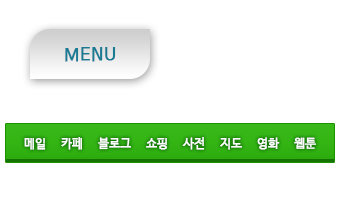
<style>
.page{position:relative;width:344px;height:206px;background:#ffffff}
.page>*{position:absolute;margin:0}
.t1{font:18px "NanumBarunGothic";color:#187a93;font-weight:bold;scale:0.96 1}
.t2{font:12px "NanumBarunGothic";color:#ffffff;font-weight:bold}
</style>
<div class="page">
<p class="t1" style="left:65px;top:47px;width:51px;height:15px">MENU</p>
<p class="t2" style="left:24px;top:137px;width:292px;height:13px">메일     카페     블로그     쇼핑     사전     지도     영화     웹툰</p>
</div>
